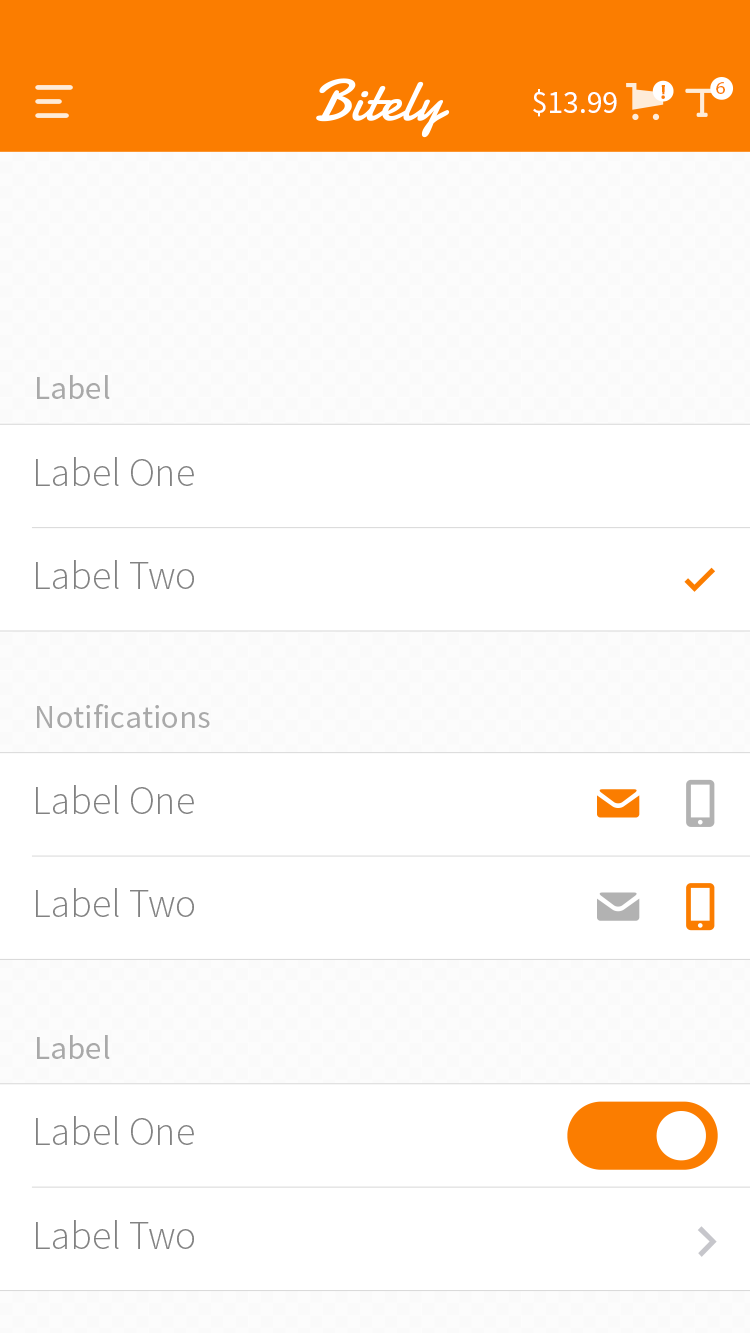
<style>
.page{position:relative;width:750px;height:1333px;background:#ffffff}
.page>*{position:absolute;margin:0}
.t1{font:31.7px "SourceSansPro-Regular";color:#ffffff}
.t2{font:20.5px "MyriadPro-Bold";color:#fb7d00}
.t3{font:18.6px "MyriadPro-Regular";color:#fb7d00}
.t4{font:32.9px "SourceSansPro-Regular";color:#a9a9a9}
.t5{font:39.9px "SourceSansPro-Light";color:#828282}
.t6{font:39.9px "SourceSansPro-Light";letter-spacing:-0.039em;color:#828282}
</style>
<div class="page">
<p class="t1" style="left:533px;top:89px;width:84px;height:28px">$13.99</p>
<p class="t2" style="left:661px;top:85px;width:4px;height:14px">!</p>
<p class="t3" style="left:716px;top:82px;width:9px;height:12px">6</p>
<p class="t4" style="left:37px;top:375px;width:73px;height:24px">Label</p>
<p class="t5" style="left:36px;top:457px;width:158px;height:29px">Label One</p>
<p class="t5" style="left:36px;top:560px;width:158px;height:29px">Label <span class="t6">T</span>wo</p>
<p class="t4" style="left:37px;top:704px;width:173px;height:24px">Notifications</p>
<p class="t5" style="left:36px;top:785px;width:158px;height:29px">Label One</p>
<p class="t5" style="left:36px;top:888px;width:158px;height:29px">Label <span class="t6">T</span>wo</p>
<p class="t4" style="left:37px;top:1035px;width:73px;height:24px">Label</p>
<p class="t5" style="left:36px;top:1116px;width:158px;height:29px">Label One</p>
<p class="t5" style="left:36px;top:1220px;width:158px;height:29px">Label <span class="t6">T</span>wo</p>
</div>
